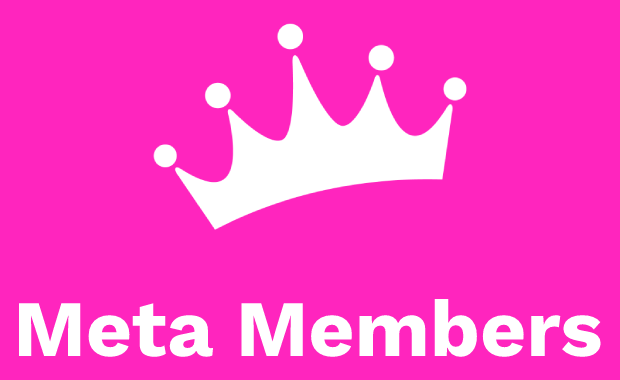
<style>
.page{position:relative;width:620px;height:380px;background:#ff25be}
.page>*{position:absolute;margin:0}
.t1{font:80px "WorkSans-Bold";color:#ffffff}
</style>
<div class="page">
<p class="t1" style="left:19px;top:299px;width:582px;height:58px">Meta Members</p>
</div>
